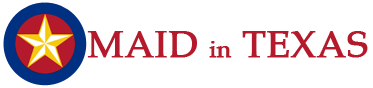
<style>
.page{position:relative;width:373px;height:88px;background:#ffffff}
.page>*{position:absolute;margin:0}
.t1{font:37.9px "BookAntiqua";color:#b41a2b;text-transform:uppercase;font-weight:bold}
.t2{font:24px "BookAntiqua";color:#b41a2b;font-weight:bold}
</style>
<div class="page">
<p class="t1" style="left:87px;top:31px;width:281px;height:27px">Maid <span class="t2">in</span> Texas</p>
</div>
